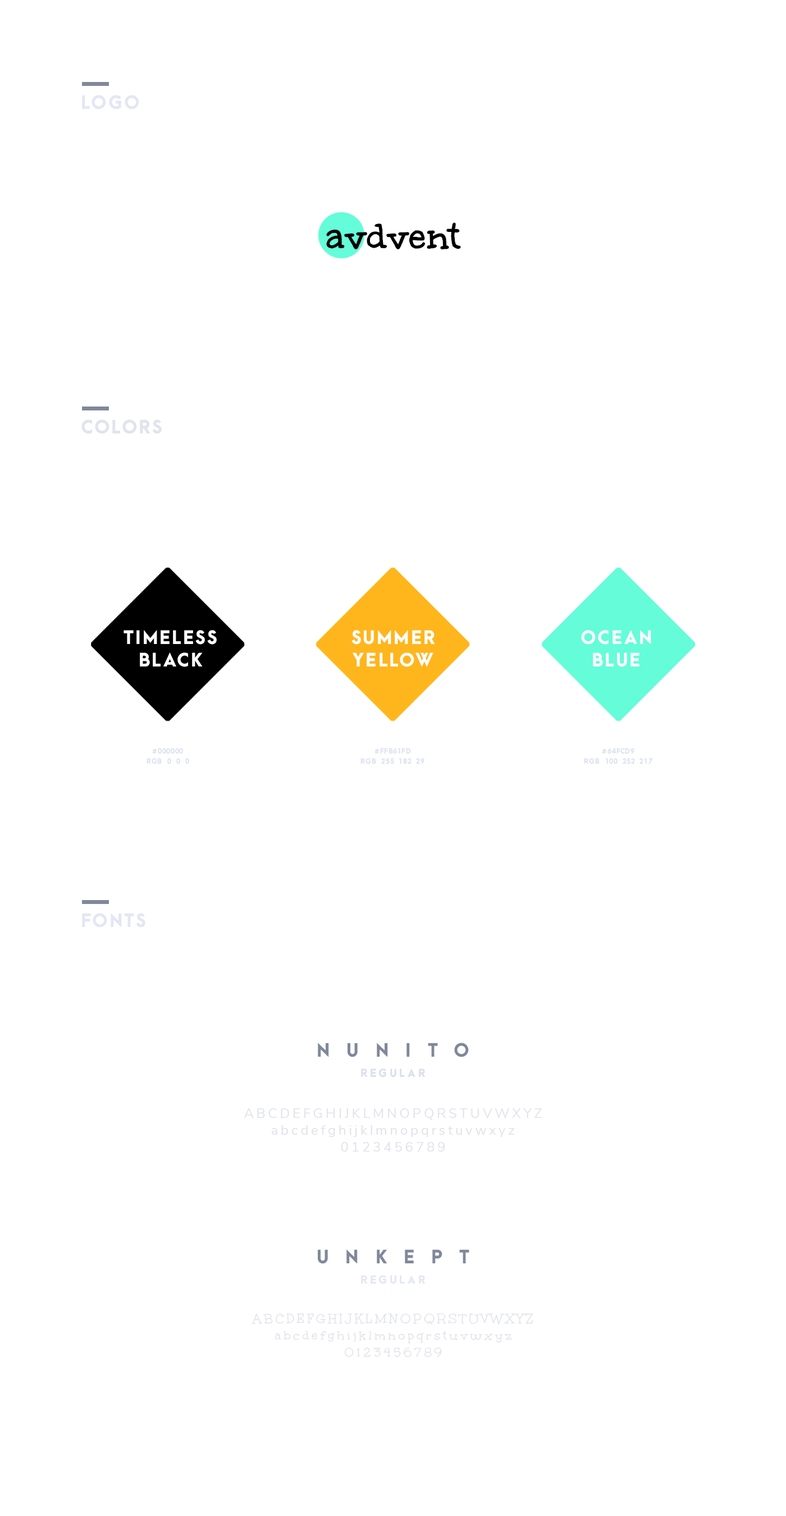
<style>
.page{position:relative;width:786px;height:1516px;background:#ffffff}
.page>*{position:absolute;margin:0}
.t1{font:16.8px "ArcaMajora3-Heavy";letter-spacing:0.1em;color:#d9dfef}
.t2{font:40.4px "Unkempt-Bold";color:#000000}
.t3{font:16.8px "ArcaMajora3-Heavy";letter-spacing:0.1em;color:#e0e4ec}
.t4{font:16.8px/22.5px "ArcaMajora3-Heavy";letter-spacing:0.1em;color:#ffffff}
.t5{font:6.7px/10.1px "ArcaMajora3-Bold";letter-spacing:0.05em;color:#d9dfef}
.t6{font:6.7px/10.1px "ArcaMajora3-Bold";letter-spacing:0.1em;color:#d9dfef}
.t7{font:10.1px/20.2px "ArcaMajora3-Heavy";letter-spacing:0.25em;color:#d9dfef}
.t8{font:16.8px/20.2px "ArcaMajora3-Heavy";letter-spacing:1em;color:#80889a}
.t9{font:13.5px/16.8px "NunitoSans-Regular";letter-spacing:0.2em;color:#e1e3ea}
.t10{font:10.1px/20.2px "ArcaMajora3-Heavy";letter-spacing:0.25em;color:#e1e3ea}
.t11{font:10.1px/20.2px "ArcaMajora3-Heavy";letter-spacing:0.25em;color:#e3e7f3}
.t12{font:13.5px/16.8px "Unkempt-Regular";letter-spacing:0.2em;color:#e1e3ea}
.t13{font:10.1px/20.2px "Unkempt-Regular";letter-spacing:0.25em;color:#e1e3ea}
</style>
<div class="page">
<p class="t1" style="left:82px;top:95px;width:57px;height:15px;opacity:0.75">LOGO</p>
<p class="t2" style="left:326px;top:222px;width:135px;height:28px">avdvent</p>
<p class="t3" style="left:81px;top:420px;width:81px;height:14px">COLORS</p>
<p class="t4" style="left:124px;top:630px;width:93px;height:37px;text-align:center">TIMELESS<br>BLACK</p>
<p class="t4" style="left:352px;top:630px;width:83px;height:37px;text-align:center">SUMMER<br>YELLOW</p>
<p class="t4" style="left:581px;top:630px;width:71px;height:37px;text-align:center">OCEAN<br>BLUE</p>
<p class="t5" style="left:147px;top:748px;width:42px;height:16px;text-align:center"><span class="t6">#</span>000000<br><span class="t6">RGB  </span>0  0  0</p>
<p class="t5" style="left:361px;top:748px;width:64px;height:16px;text-align:center"><span class="t6">#</span>FFB61FD<br><span class="t6">RGB  </span>255  182  29</p>
<p class="t5" style="left:584px;top:748px;width:69px;height:16px;text-align:center"><span class="t6">#</span>64FCD9<br><span class="t6">RGB  </span>100  252  217</p>
<p class="t1" style="left:82px;top:913px;width:63px;height:15px;opacity:0.75">FONTS</p>
<p class="t7" style="left:318px;top:1043px;width:151px;height:35px;text-align:center"><span class="t8">NUNITO<br></span>REGULAR</p>
<p class="t9" style="left:244px;top:1109px;width:298px;height:43px;text-align:center"><span class="t10"><br></span>ABCDEFGHIJKLMNOPQRSTUVWXYZ<br>abcdefghijklmnopqrstuvwxyz<br>0123456789</p>
<p class="t11" style="left:318px;top:1250px;width:152px;height:35px;text-align:center"><span class="t8">UNKEPT<br></span>REGULAR</p>
<p class="t12" style="left:251px;top:1314px;width:283px;height:44px;text-align:center"><span class="t13"><br></span>ABCDEFGHIJKLMNOPQRSTUVWXYZ<br>abcdefghijklmnopqrstuvwxyz<br>0123456789</p>
</div>
